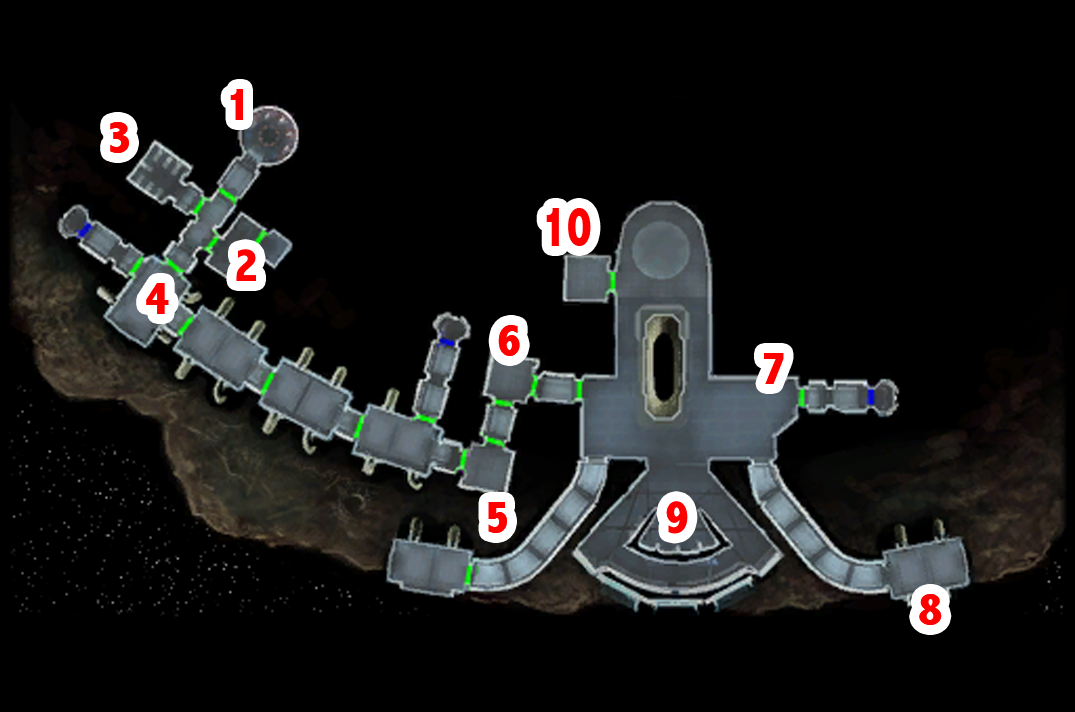
<style>
.page{position:relative;width:1075px;height:712px;background:#000000}
.page>*{position:absolute;margin:0}
.t1{font:48px "AbadiMT-CondensedExtraBold";color:#ff0000}
.t2{font:58.1px "AbadiMT-CondensedExtraBold";color:#ff0000;scale:0.83 1}
</style>
<div class="page">
<p class="t1" style="left:230px;top:89px;width:13px;height:31px">1</p>
<p class="t1" style="left:110px;top:122px;width:19px;height:31px">3</p>
<p class="t2" style="left:546px;top:208px;width:45px;height:38px">10</p>
<p class="t1" style="left:236px;top:249px;width:20px;height:32px">2</p>
<p class="t1" style="left:146px;top:283px;width:23px;height:31px">4</p>
<p class="t1" style="left:498px;top:325px;width:22px;height:31px">6</p>
<p class="t1" style="left:764px;top:353px;width:20px;height:31px">7</p>
<p class="t1" style="left:488px;top:502px;width:19px;height:31px">5</p>
<p class="t1" style="left:666px;top:501px;width:22px;height:33px">9</p>
<p class="t1" style="left:919px;top:594px;width:23px;height:31px">8</p>
</div>
